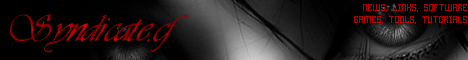
<style>
.page{position:relative;width:468px;height:60px;background:#000000}
.page>*{position:absolute;margin:0}
.t1{font:10px "HomespunTTBRK";color:#ad0000}
.t2{font:36px "Astrania";color:#920000}
</style>
<div class="page">
<p class="t1" style="left:354px;top:4px;width:113px;height:20px;text-align:right">NEWS, LINKS, SOFTWARE<br>GAMES, TOOLS, TUTORIALS</p>
<p class="t2" style="left:10px;top:14px;width:178px;height:39px">Syndicate.cf</p>
</div>
